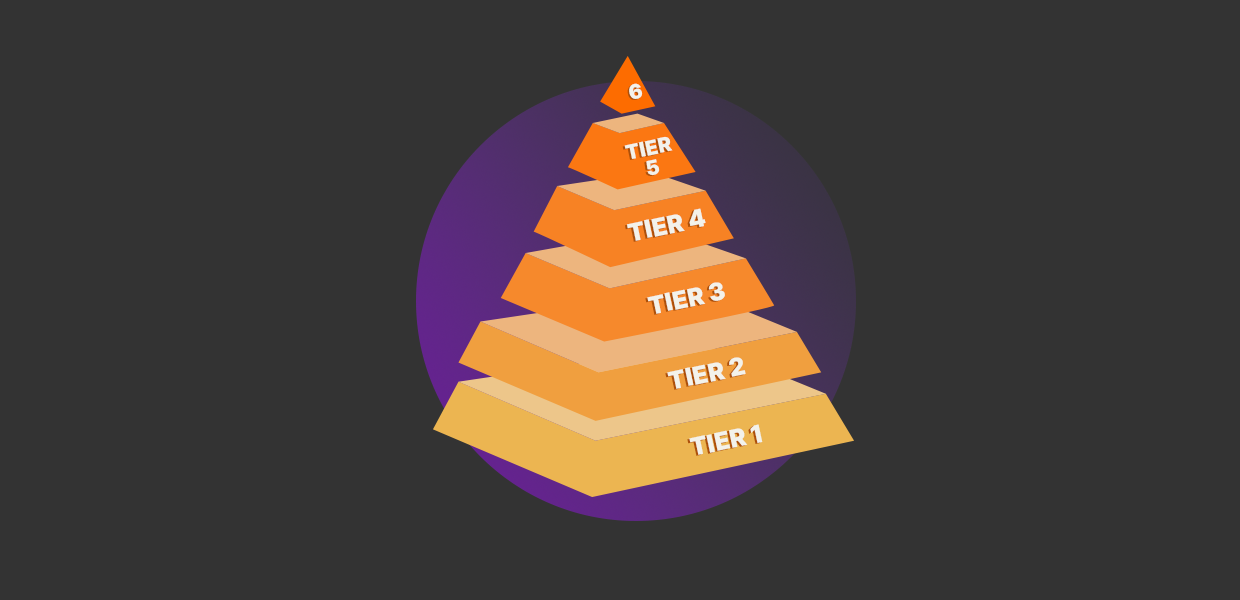
<style>
.page{position:relative;width:1240px;height:600px;background:#333333}
.page>*{position:absolute;margin:0}
.t1{font:20.2px "Inter-Black";color:#f3f2eb;text-transform:uppercase}
.t2{font:20.2px/20px "Inter-Black";text-transform:uppercase}
.t3{font:20.2px/20px "Inter-Black";color:#f3f2eb;text-transform:uppercase}
.t4{font:24.5px "Inter-Black";color:#f3f2eb;text-transform:uppercase}
.t5{font:24.5px "Inter-Black";text-transform:uppercase}
</style>
<div class="page">
<p class="t1" style="left:627px;top:84px;width:14px;height:16px;rotate:-12deg">6</p>
<p class="t1" style="left:629px;top:83px;width:14px;height:16px;rotate:-12deg">6</p>
<p class="t2" style="left:622px;top:137px;width:49px;height:40px;text-align:center;rotate:-12deg">tier<br>5</p>
<p class="t3" style="left:624px;top:136px;width:49px;height:40px;text-align:center;rotate:-12deg">tier<br>5</p>
<p class="t4" style="left:625px;top:209px;width:79px;height:33px;rotate:-12deg">Tier 4</p>
<p class="t4" style="left:627px;top:208px;width:79px;height:33px;rotate:-12deg">Tier 4</p>
<p class="t4" style="left:645px;top:283px;width:78px;height:32px;rotate:-12deg">Tier 3</p>
<p class="t4" style="left:647px;top:282px;width:78px;height:32px;rotate:-12deg">Tier 3</p>
<p class="t4" style="left:665px;top:358px;width:79px;height:32px;rotate:-12deg">Tier 2</p>
<p class="t4" style="left:667px;top:357px;width:79px;height:32px;rotate:-12deg">Tier 2</p>
<p class="t5" style="left:687px;top:425px;width:74px;height:31px;rotate:-12deg">Tier 1</p>
<p class="t4" style="left:689px;top:424px;width:74px;height:31px;rotate:-12deg">Tier 1</p>
</div>
